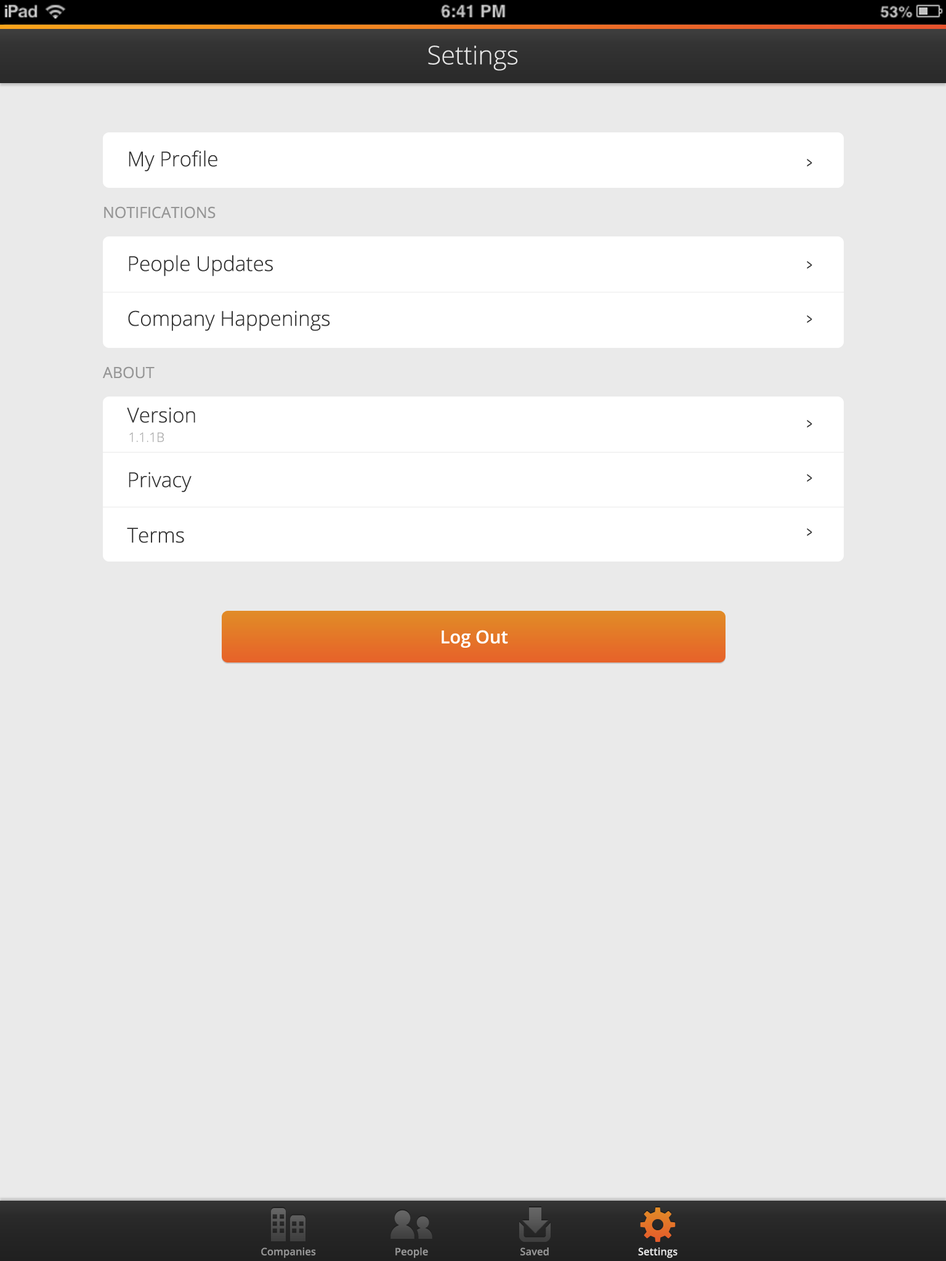
<style>
.page{position:relative;width:946px;height:1261px;background:#eaeaea}
.page>*{position:absolute;margin:0}
.t1{font:25.7px "OpenSans-Light";color:#e5e5e5}
.t2{font:20.5px "OpenSans-Light";color:#343434}
.t3{font:15.4px "OpenSans";color:#343434;scale:0.64 1}
.t4{font:15.4px "OpenSans";color:#969696}
.t5{font:12.8px "OpenSans-Light";color:#aaaaaa}
.t6{font:18px "OpenSans-Semibold";color:#ffffff}
.t7{font:10.3px "OpenSans-Semibold";color:#969696}
.t8{font:10.3px "OpenSans-Semibold";color:#e5e5e5}
</style>
<div class="page">
<p class="t1" style="left:428px;top:46px;width:90px;height:25px">Settings</p>
<p class="t2" style="left:129px;top:150px;width:88px;height:22px">My Profile</p>
<p class="t3" style="left:807px;top:159px;width:5px;height:8px">&gt;</p>
<p class="t4" style="left:104px;top:206px;width:111px;height:13px">NOTIFICATIONS</p>
<p class="t2" style="left:129px;top:255px;width:144px;height:21px">People Updates</p>
<p class="t3" style="left:807px;top:261px;width:5px;height:8px">&gt;</p>
<p class="t2" style="left:128px;top:310px;width:202px;height:21px">Company Happenings</p>
<p class="t3" style="left:807px;top:315px;width:5px;height:8px">&gt;</p>
<p class="t4" style="left:103px;top:366px;width:52px;height:13px">ABOUT</p>
<p class="t2" style="left:127px;top:407px;width:68px;height:16px">Version</p>
<p class="t3" style="left:807px;top:420px;width:5px;height:8px">&gt;</p>
<p class="t5" style="left:129px;top:432px;width:35px;height:10px">1.1.1B</p>
<p class="t2" style="left:129px;top:472px;width:62px;height:21px">Privacy</p>
<p class="t3" style="left:807px;top:474px;width:5px;height:8px">&gt;</p>
<p class="t2" style="left:127px;top:528px;width:57px;height:15px">Terms</p>
<p class="t3" style="left:807px;top:528px;width:5px;height:8px">&gt;</p>
<p class="t6" style="left:441px;top:630px;width:67px;height:18px">Log Out</p>
<p class="t7" style="left:261px;top:1247px;width:55px;height:11px">Companies</p>
<p class="t7" style="left:395px;top:1247px;width:33px;height:11px">People</p>
<p class="t7" style="left:520px;top:1247px;width:29px;height:8px">Saved</p>
<p class="t8" style="left:638px;top:1247px;width:39px;height:11px">Settings</p>
</div>
